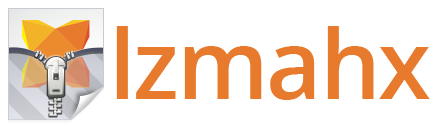
<style>
.page{position:relative;width:437px;height:128px;background:#ffffff}
.page>*{position:absolute;margin:0}
.t1{font:96px "OpenSans-Semibold";letter-spacing:-0.025em;color:#e77a2c}
</style>
<div class="page">
<p class="t1" style="left:116px;top:26px;width:314px;height:74px">lzmahx</p>
</div>
